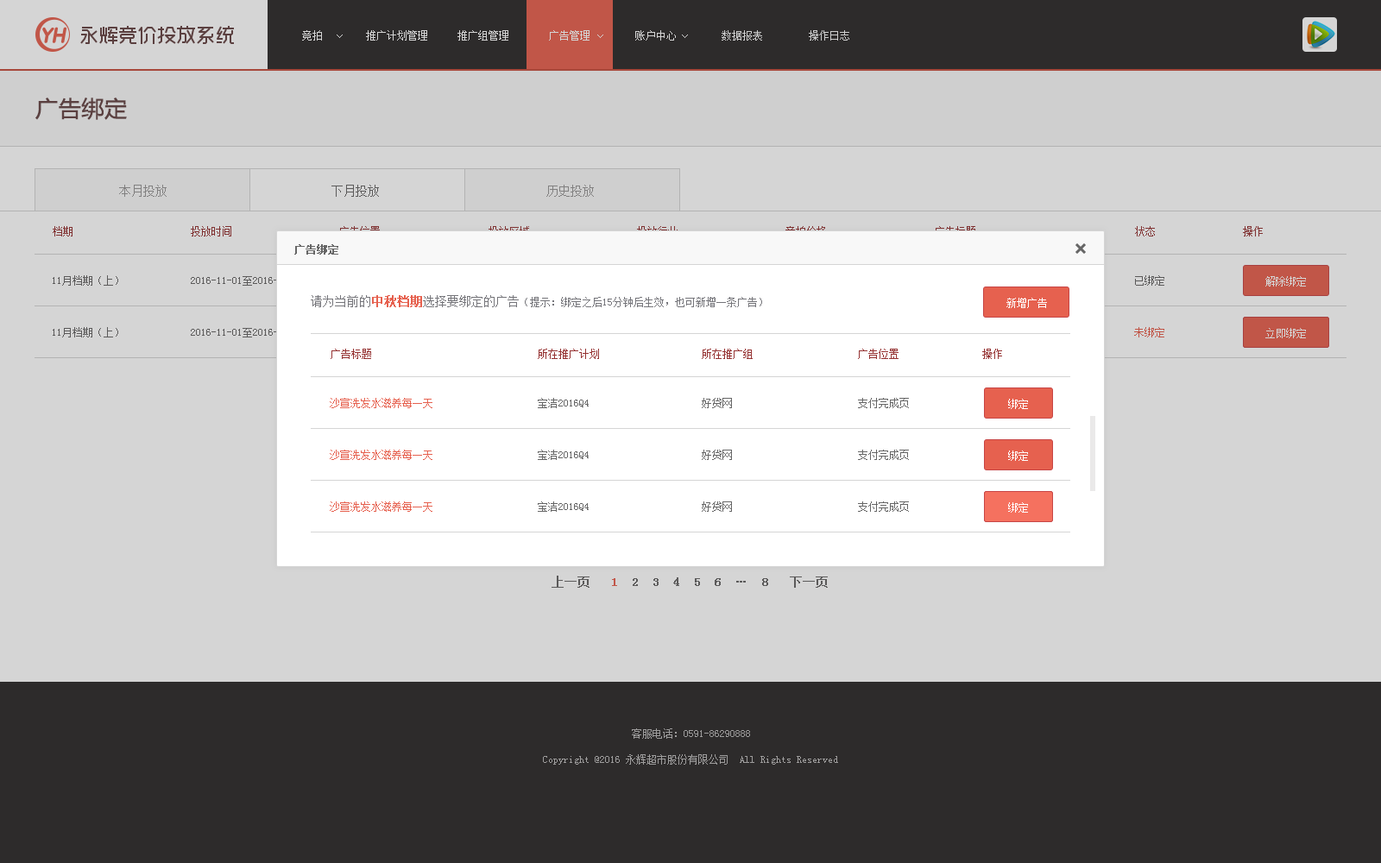
<style>
.page{position:relative;width:1381px;height:863px;background:#d5d5d5}
.page>*{position:absolute;margin:0}
.t1{font:10.4px "SimSun";color:#d5d5d5}
.t2{font:10.4px "SimSun";color:#cfcfcf}
.t3{font:22.4px "MicrosoftYaHei";color:#664545;font-weight:bold}
.t4{font:12.1px "SimSun";color:#818080}
.t5{font:12.1px "SimSun";color:#969595}
.t6{font:12.1px "SimSun";color:#666666}
.t7{font:10.4px "SimSun";color:#953232}
.t8{font:10.4px "SimSun"}
.t9{font:10.4px "SimSun";color:#666666;font-weight:bold}
.t10{font:10.4px "SimSun";color:#666666}
.t11{font:10.4px "SimSun";color:#75757a}
.t12{font:12.1px "SimSun";color:#75757a}
.t13{font:12.1px "SimSun";color:#e6614f;font-weight:bold}
.t14{font:10.4px "SimSun";color:#ffffff}
.t15{font:10.4px "SimSun";color:#c15648}
.t16{font:10.4px "SimSun";color:#e6614f}
.t17{font:12.1px "SimSun";color:#666666;font-weight:bold}
.t18{font:10.4px "SimSun";color:#9e9d9d}
</style>
<div class="page">
<p class="t1" style="left:302px;top:30px;width:20px;height:11px">竞拍</p>
<p class="t1" style="left:366px;top:30px;width:61px;height:11px">推广计划管理</p>
<p class="t1" style="left:458px;top:30px;width:50px;height:11px">推广组管理</p>
<p class="t1" style="left:549px;top:30px;width:41px;height:11px">广告管理</p>
<p class="t1" style="left:635px;top:30px;width:41px;height:11px">账户中心</p>
<p class="t2" style="left:722px;top:30px;width:40px;height:11px">数据报表</p>
<p class="t2" style="left:809px;top:30px;width:40px;height:11px">操作日志</p>
<p class="t3" style="left:35px;top:98px;width:92px;height:22px">广告绑定</p>
<p class="t4" style="left:119px;top:185px;width:48px;height:12px">本月投放</p>
<p class="t5" style="left:119px;top:185px;width:48px;height:12px">本月投放</p>
<p class="t6" style="left:332px;top:185px;width:47px;height:12px">下月投放</p>
<p class="t4" style="left:546px;top:185px;width:48px;height:12px">历史投放</p>
<p class="t5" style="left:546px;top:185px;width:48px;height:12px">历史投放</p>
<p class="t7" style="left:53px;top:226px;width:20px;height:11px">档期</p>
<p class="t7" style="left:191px;top:226px;width:40px;height:11px">投放时间</p>
<p class="t8" style="left:339px;top:226px;width:41px;height:11px">广告位置</p>
<p class="t8" style="left:489px;top:226px;width:40px;height:11px">投放区域</p>
<p class="t8" style="left:637px;top:226px;width:41px;height:11px">投放行业</p>
<p class="t8" style="left:786px;top:226px;width:40px;height:11px">竞拍价格</p>
<p class="t8" style="left:935px;top:226px;width:41px;height:11px">广告标题</p>
<p class="t7" style="left:1135px;top:226px;width:20px;height:11px">状态</p>
<p class="t7" style="left:1243px;top:226px;width:20px;height:11px">操作</p>
<p class="t9" style="left:294px;top:244px;width:44px;height:11px">广告绑定</p>
<p class="t10" style="left:53px;top:275px;width:65px;height:11px">11月档期（上）</p>
<p class="t10" style="left:191px;top:276px;width:113px;height:10px">2016-11-01至2016-11-15</p>
<p class="t10" style="left:1135px;top:275px;width:30px;height:11px">已绑定</p>
<p class="t1" style="left:1266px;top:276px;width:40px;height:11px">解除绑定</p>
<p class="t11" style="left:311px;top:295px;width:451px;height:12px"><span class="t12">请为当前的</span><span class="t13">中秋档期</span><span class="t12">选择要绑定的广告</span>（提示：绑定之后15分钟后生效，也可新增一条广告）</p>
<p class="t14" style="left:1007px;top:298px;width:40px;height:10px">新增广告</p>
<p class="t10" style="left:53px;top:327px;width:65px;height:11px">11月档期（上）</p>
<p class="t10" style="left:191px;top:328px;width:113px;height:10px">2016-11-01至2016-11-15</p>
<p class="t15" style="left:1134px;top:327px;width:31px;height:11px">未绑定</p>
<p class="t1" style="left:1266px;top:328px;width:40px;height:10px">立即绑定</p>
<p class="t1" style="left:1266px;top:328px;width:40px;height:10px">立即绑定</p>
<p class="t7" style="left:331px;top:349px;width:40px;height:10px">广告标题</p>
<p class="t7" style="left:538px;top:349px;width:61px;height:10px">所在推广计划</p>
<p class="t7" style="left:702px;top:349px;width:51px;height:10px">所在推广组</p>
<p class="t7" style="left:858px;top:349px;width:41px;height:10px">广告位置</p>
<p class="t7" style="left:982px;top:349px;width:20px;height:10px">操作</p>
<p class="t16" style="left:330px;top:398px;width:103px;height:10px">沙宣洗发水滋养每一天</p>
<p class="t10" style="left:538px;top:398px;width:51px;height:10px">宝洁2016Q4</p>
<p class="t10" style="left:702px;top:398px;width:30px;height:10px">好贷网</p>
<p class="t10" style="left:858px;top:398px;width:51px;height:10px">支付完成页</p>
<p class="t14" style="left:1008px;top:399px;width:20px;height:10px">绑定</p>
<p class="t16" style="left:330px;top:450px;width:103px;height:10px">沙宣洗发水滋养每一天</p>
<p class="t10" style="left:538px;top:450px;width:51px;height:10px">宝洁2016Q4</p>
<p class="t10" style="left:702px;top:450px;width:30px;height:10px">好贷网</p>
<p class="t10" style="left:858px;top:450px;width:51px;height:10px">支付完成页</p>
<p class="t14" style="left:1008px;top:451px;width:20px;height:10px">绑定</p>
<p class="t16" style="left:330px;top:502px;width:103px;height:10px">沙宣洗发水滋养每一天</p>
<p class="t10" style="left:538px;top:502px;width:51px;height:10px">宝洁2016Q4</p>
<p class="t10" style="left:702px;top:502px;width:30px;height:10px">好贷网</p>
<p class="t10" style="left:858px;top:502px;width:51px;height:10px">支付完成页</p>
<p class="t14" style="left:1008px;top:502px;width:20px;height:11px">绑定</p>
<p class="t14" style="left:1008px;top:502px;width:20px;height:11px">绑定</p>
<p class="t17" style="left:552px;top:576px;width:276px;height:12px">上一页   <span class="t13">1  </span>2  3  4  5  6  …  8   下一页</p>
<p class="t18" style="left:632px;top:729px;width:118px;height:10px">客服电话：0591-86290888</p>
<p class="t18" style="left:543px;top:755px;width:295px;height:10px">Copyright @2016 永辉超市股份有限公司  All Rights Reserved</p>
</div>
